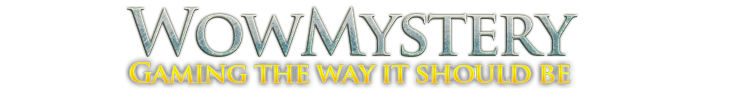
<style>
.page{position:relative;width:735px;height:100px;background:#ffffff}
.page>*{position:absolute;margin:0}
.t1{font:28px "TrajanPro-Bold";letter-spacing:-0.05em}
</style>
<div class="page">
<p class="t1" style="left:130px;top:62px;width:440px;height:21px">Gaming the way it should be</p>
</div>
